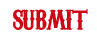
<style>
.page{position:relative;width:97px;height:38px;background:#ffffff}
.page>*{position:absolute;margin:0}
.t1{font:35px "CarnivaleeFreakshow";letter-spacing:-0.035em;color:#cc0814}
</style>
<div class="page">
<p class="t1" style="left:13px;top:8px;width:75px;height:22px">submit</p>
</div>
